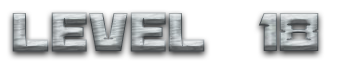
<style>
.page{position:relative;width:364px;height:64px;background:#ffffff}
.page>*{position:absolute;margin:0}
.t1{font:60px "BananaBrick"}
</style>
<div class="page">
<p class="t1" style="left:12px;top:12px;width:307px;height:40px">Level  18</p>
</div>
